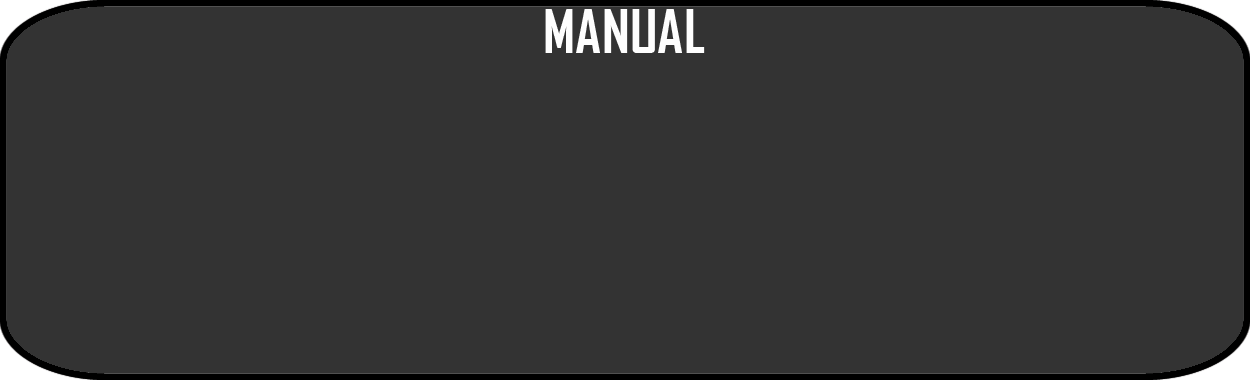
<style>
.page{position:relative;width:1250px;height:380px;background:#333333}
.page>*{position:absolute;margin:0}
.t1{font:58.3px "AgencyFB-Bold";color:#fefefe}
</style>
<div class="page">
<p class="t1" style="left:545px;top:9px;width:160px;height:44px">MANUAL</p>
</div>
